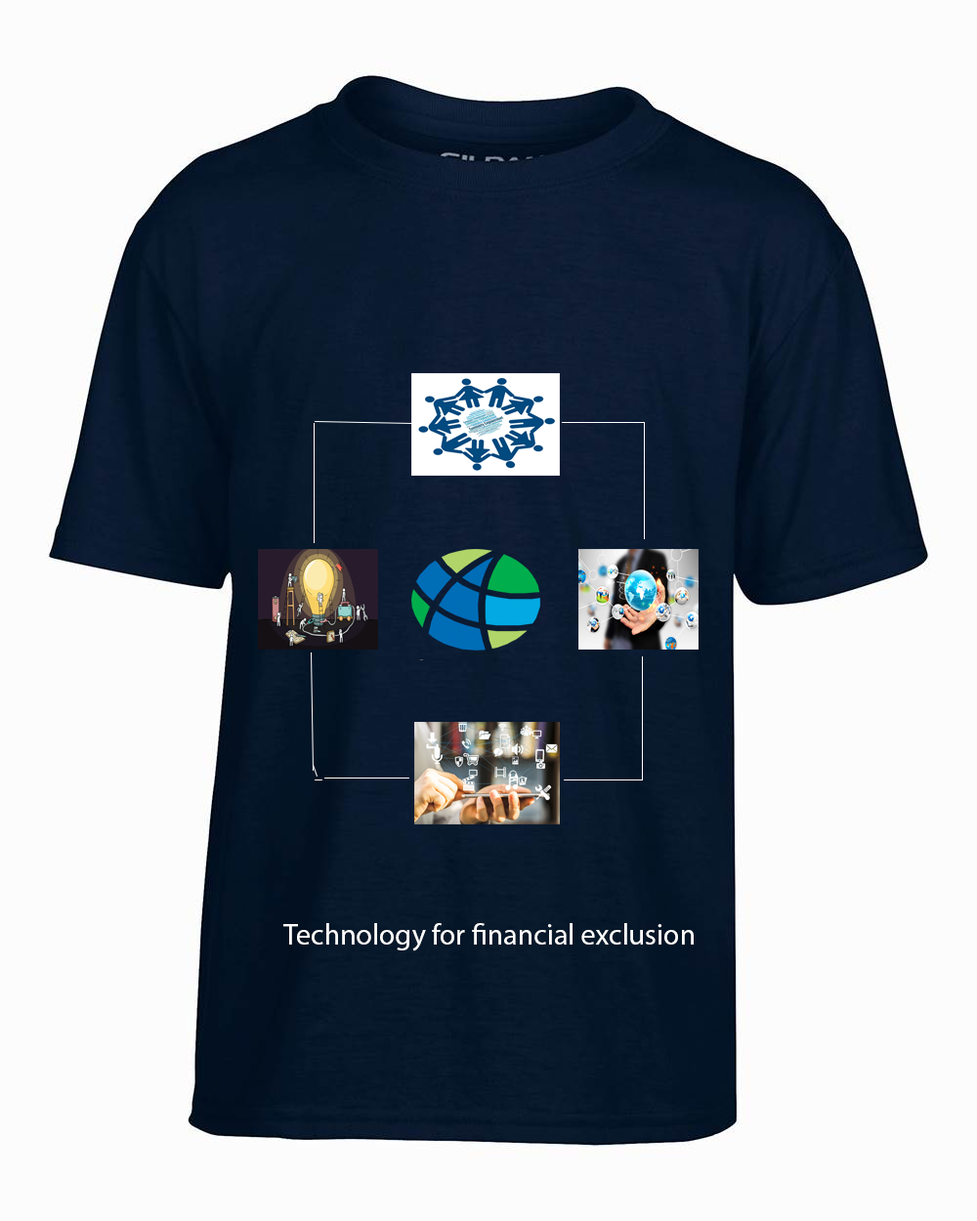
<style>
.page{position:relative;width:977px;height:1221px;background:#fcfcfc}
.page>*{position:absolute;margin:0}
.t1{font:29.6px "MyriadPro-Regular";color:#ffffff}
</style>
<div class="page">
<p class="t1" style="left:283px;top:923px;width:410px;height:28px">Technology for financial exclusion</p>
</div>
